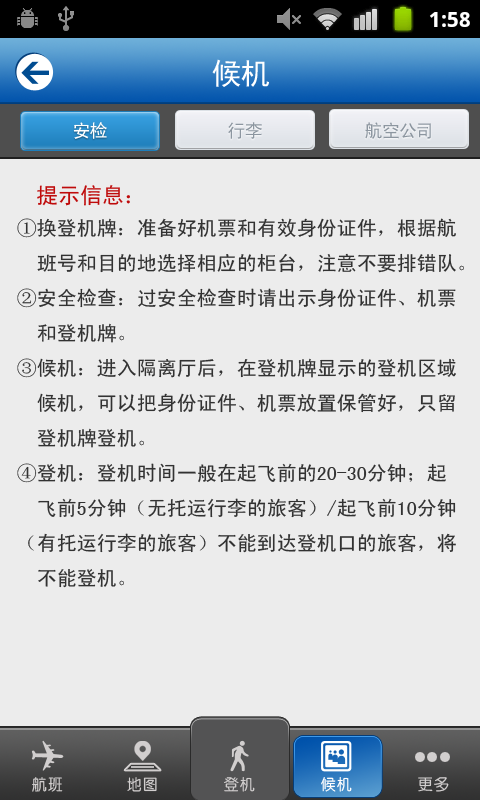
<style>
.page{position:relative;width:480px;height:800px;background:#ececec}
.page>*{position:absolute;margin:0}
.t1{font:30px "SimHei";color:#ffffff;text-transform:uppercase}
.t2{font:18px "SimHei";color:#ffffff;text-transform:uppercase}
.t3{font:18px "SimHei";color:#8c96a0;text-transform:uppercase}
.t4{font:22px "SimHei";color:#bf0b0b}
.t5{font:20px "SimHei";color:#323232}
.t6{font:20px "SimHei";color:#bf0b0b}
.t7{font:16px "CTZhongYuanSJ";color:#d1cece}
.t8{font:16px "CTZhongYuanSJ";color:#fffefe}
</style>
<div class="page">
<p class="t1" style="left:212px;top:59px;width:57px;height:28px">候机</p>
<p class="t2" style="left:73px;top:122px;width:34px;height:17px">安检</p>
<p class="t3" style="left:228px;top:122px;width:34px;height:17px">行李</p>
<p class="t3" style="left:365px;top:122px;width:66px;height:17px">航空公司</p>
<p class="t4" style="left:37px;top:185px;width:93px;height:21px">提示信息：</p>
<p class="t5" style="left:17px;top:218px;width:447px;height:370px"><span class="t6"><br></span>①换登机牌：准备好机票和有效身份证件，根据航<br>  班号和目的地选择相应的柜台，注意不要排错队。<br>②安全检查：过安全检查时请出示身份证件、机票<br>  和登机牌。<br>③候机：进入隔离厅后，在登机牌显示的登机区域<br>  候机，可以把身份证件、机票放置保管好，只留<br>  登机牌登机。<br>④登机：登机时间一般在起飞前的20-30分钟；起<br>  飞前5分钟（无托运行李的旅客）/起飞前10分钟<br>（有托运行李的旅客）不能到达登机口的旅客，将<br>  不能登机。</p>
<p class="t7" style="left:32px;top:777px;width:31px;height:15px">航班</p>
<p class="t7" style="left:127px;top:777px;width:30px;height:15px">地图</p>
<p class="t7" style="left:224px;top:777px;width:31px;height:15px">登机</p>
<p class="t8" style="left:321px;top:777px;width:31px;height:15px">候机</p>
<p class="t7" style="left:418px;top:777px;width:31px;height:15px">更多</p>
</div>
